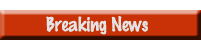
<style>
.page{position:relative;width:201px;height:40px;background:#c83206}
.page>*{position:absolute;margin:0}
.t1{font:18px "MarkerFelt";color:#e3e3e3}
</style>
<div class="page">
<p class="t1" style="left:46px;top:16px;width:102px;height:19px">Breaking News</p>
</div>
